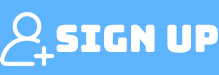
<style>
.page{position:relative;width:219px;height:75px;background:#5eb4ff}
.page>*{position:absolute;margin:0}
.t1{font:37.5px "BungeeLayers-Regular";color:#ffffff}
</style>
<div class="page">
<p class="t1" style="left:56px;top:24px;width:162px;height:29px">SIGN UP</p>
</div>
